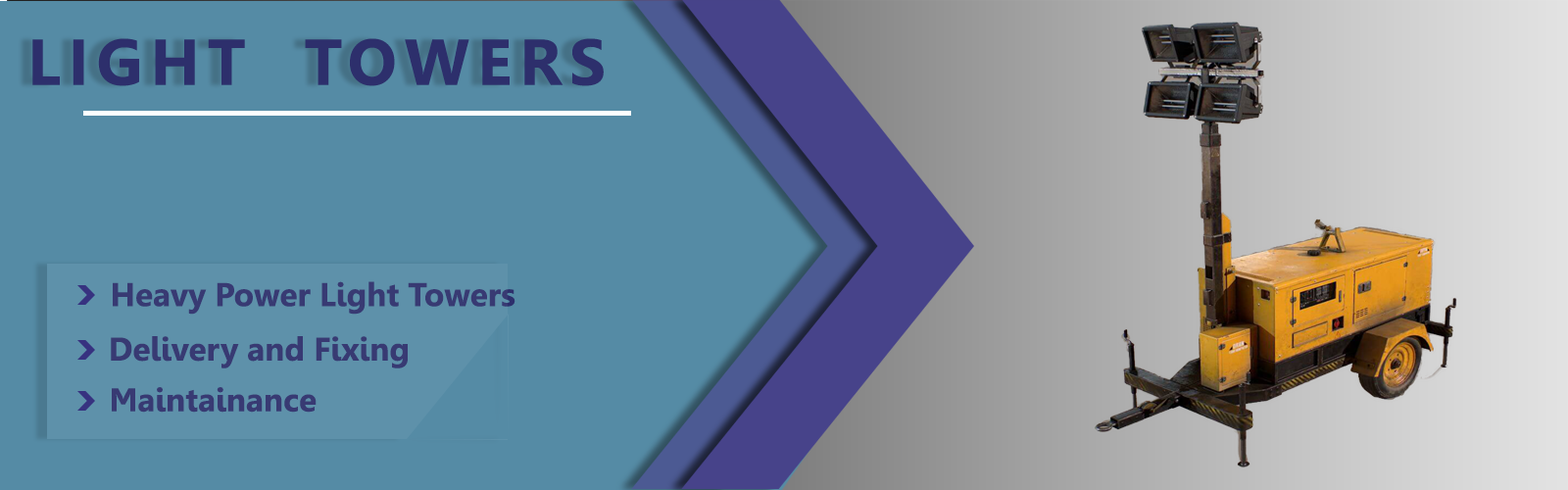
<style>
.page{position:relative;width:1568px;height:490px;background:#558ba5}
.page>*{position:absolute;margin:0}
.t1{font:64.7px "Leelawadee-Bold";letter-spacing:0.12em;color:#2d2f6c}
.t2{font:32.7px "Leelawadee-Bold";color:#2d2f6c}
</style>
<div class="page">
<p class="t1" style="left:32px;top:38px;width:572px;height:48px">LIGHT  TOWERS</p>
<p class="t2" style="left:113px;top:281px;width:402px;height:34px">Heavy Power Light Towers</p>
<p class="t2" style="left:111px;top:336px;width:297px;height:32px">Delivery and Fixing</p>
<p class="t2" style="left:112px;top:387px;width:205px;height:26px">Maintainance</p>
</div>
